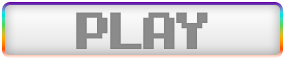
<style>
.page{position:relative;width:285px;height:60px}
.page>*{position:absolute;margin:0}
.t1{font:41.7px "PixelOperator8-Bold";letter-spacing:-0.2em;color:#8b8b8b}
</style>
<div class="page">
<p class="t1" style="left:76px;top:12px;width:132px;height:37px">PLAY</p>
</div>
